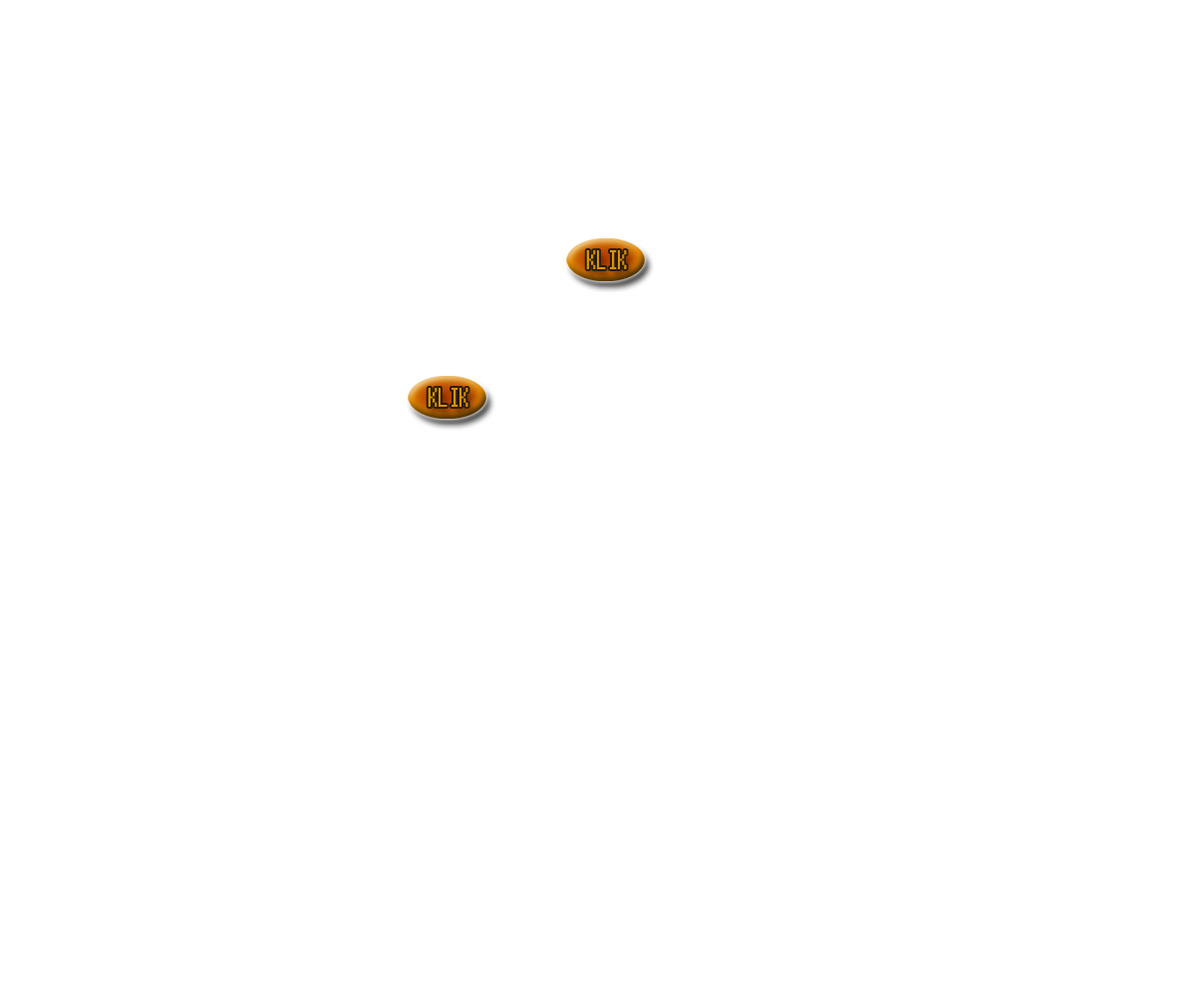
<style>
.page{position:relative;width:1196px;height:997px;background:#ffffff}
.page>*{position:absolute;margin:0}
.t1{font:27px "Terminal";color:#d99203}
</style>
<div class="page">
<p class="t1" style="left:586px;top:250px;width:41px;height:19px">KLIK</p>
</div>
